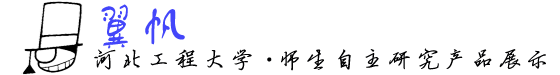
<style>
.page{position:relative;width:560px;height:75px;background:#ffffff}
.page>*{position:absolute;margin:0}
.t1{font:23px/49.5px "FZYBXSJW--GB1-0";letter-spacing:0.2em;color:#000001}
.t2{font:46px/49.5px "FZZJ-TTMBFONT";letter-spacing:0.1em;color:#4346fa}
.t3{font:23px/49.5px "FZSTK--GBK1-0";letter-spacing:-0.1em;color:#000001}
</style>
<div class="page">
<p class="t1" style="left:94px;top:4px;width:452px;height:67px"><span class="t2">翼帆<br></span>河北工程大学<span class="t3">·</span>师生自主研究产品展示</p>
</div>
